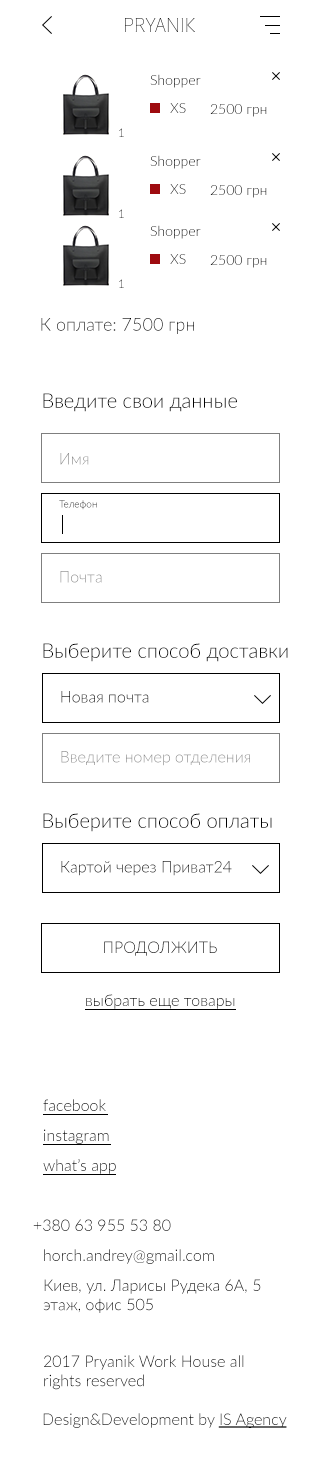
<style>
.page{position:relative;width:320px;height:1466px;background:#ffffff}
.page>*{position:absolute;margin:0}
.t1{font:14px "Lato-Light"}
.t2{font:12px "Lato-Light"}
.t3{font:18px "Lato-Light";color:#000000}
.t4{font:20px "Lato-Light";color:#000000}
.t5{font:16px "Lato-Light"}
.t6{font:10px "Lato-Light"}
.t7{font:16px "Lato-Light";text-transform:uppercase}
.t8{font:16px "Lato-Light";color:#000000}
.t9{font:16px "Lato-Light";color:#000000;text-decoration:underline}
</style>
<div class="page">
<p class="t1" style="left:150px;top:74px;width:51px;height:14px">Shopper</p>
<p class="t1" style="left:170px;top:103px;width:16px;height:10px">XS</p>
<p class="t1" style="left:210px;top:104px;width:57px;height:13px">2500 грн</p>
<p class="t2" style="left:119px;top:128px;width:5px;height:9px">1</p>
<p class="t1" style="left:150px;top:155px;width:51px;height:14px">Shopper</p>
<p class="t1" style="left:170px;top:184px;width:16px;height:10px">XS</p>
<p class="t1" style="left:210px;top:185px;width:57px;height:13px">2500 грн</p>
<p class="t2" style="left:119px;top:209px;width:5px;height:9px">1</p>
<p class="t1" style="left:150px;top:225px;width:51px;height:14px">Shopper</p>
<p class="t1" style="left:170px;top:254px;width:16px;height:10px">XS</p>
<p class="t1" style="left:210px;top:255px;width:57px;height:13px">2500 грн</p>
<p class="t2" style="left:119px;top:279px;width:5px;height:9px">1</p>
<p class="t3" style="left:41px;top:318px;width:153px;height:16px">К оплате: 7500 грн</p>
<p class="t4" style="left:43px;top:393px;width:194px;height:19px">Введите свои данные</p>
<p class="t5" style="left:60px;top:453px;width:29px;height:12px">Имя</p>
<p class="t6" style="left:59px;top:500px;width:38px;height:10px">Телефон</p>
<p class="t5" style="left:60px;top:571px;width:42px;height:12px">Почта</p>
<p class="t4" style="left:43px;top:643px;width:245px;height:19px">Выберите способ доставки</p>
<p class="t5" style="left:61px;top:691px;width:88px;height:12px">Новая почта</p>
<p class="t5" style="left:61px;top:751px;width:189px;height:15px">Введите номер отделения</p>
<p class="t4" style="left:43px;top:813px;width:229px;height:19px">Выберите способ оплаты</p>
<p class="t5" style="left:61px;top:861px;width:171px;height:15px">Картой через Приват24</p>
<p class="t7" style="left:104px;top:941px;width:113px;height:15px">Продолжить</p>
<p class="t8" style="left:86px;top:994px;width:149px;height:15px">выбрать еще товары</p>
<p class="t5" style="left:43px;top:1099px;width:63px;height:12px">facebook</p>
<p class="t5" style="left:44px;top:1129px;width:65px;height:15px">instagram</p>
<p class="t5" style="left:43px;top:1159px;width:73px;height:15px">what’s app</p>
<p class="t5" style="left:33px;top:1219px;width:138px;height:12px">+380 63 955 53 80</p>
<p class="t5" style="left:44px;top:1249px;width:170px;height:15px">horch.andrey@gmail.com</p>
<p class="t8" style="left:43px;top:1279px;width:218px;height:34px">Киев, ул. Ларисы Рудека 6А, 5 этаж, офис 505</p>
<p class="t8" style="left:44px;top:1355px;width:200px;height:35px">2017 Pryanik Work House all rights reserved</p>
<p class="t8" style="left:43px;top:1413px;width:244px;height:15px">Design&amp;Development by <span class="t9">IS Agency</span></p>
</div>
